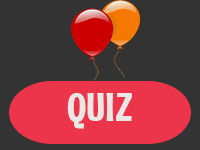
<style>
.page{position:relative;width:200px;height:150px;background:#333333}
.page>*{position:absolute;margin:0}
.t1{font:41.7px "LasVegas-Jackpot";color:#ebe7e5;text-transform:uppercase;scale:1.21 1}
</style>
<div class="page">
<p class="t1" style="left:67px;top:93px;width:65px;height:36px">quiz</p>
</div>
